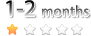
<style>
.page{position:relative;width:91px;height:36px;background:#ffffff}
.page>*{position:absolute;margin:0}
.t1{font:15px "MyriadPro-Regular"}
.t2{font:24px "MyriadPro-Regular"}
</style>
<div class="page">
<p class="t1" style="left:6px;top:0px;width:83px;height:17px"><span class="t2">1-2 </span>months</p>
</div>
